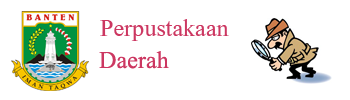
<style>
.page{position:relative;width:350px;height:100px;background:#ffffff}
.page>*{position:absolute;margin:0}
.t1{font:30px "Aparajita";color:#cc3761}
</style>
<div class="page">
<p class="t1" style="left:100px;top:19px;width:129px;height:22px">Perpustakaan</p>
<p class="t1" style="left:99px;top:51px;width:70px;height:18px">Daerah</p>
</div>
